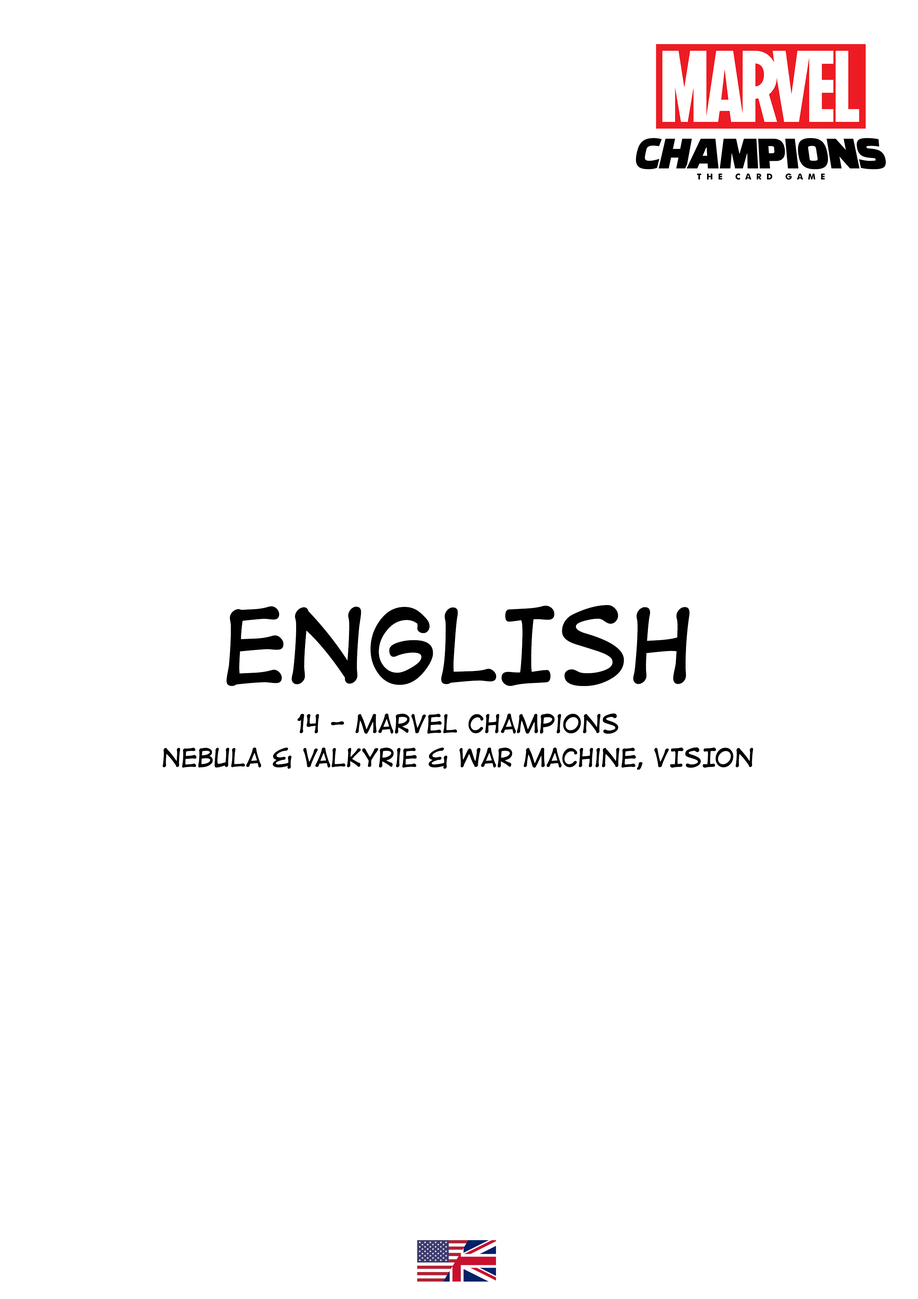
<style>
.page{position:relative;width:918px;height:1299px;background:#ffffff}
.page>*{position:absolute;margin:0}
.t1{font:123.4px "DigitalStripBB";color:#000000}
.t2{font:30.9px/33.9px "DigitalStripBB";color:#000000}
</style>
<div class="page">
<p class="t1" style="left:227px;top:605px;width:463px;height:81px">ENGLISH</p>
<p class="t2" style="left:163px;top:713px;width:590px;height:57px;text-align:center">14 - Marvel Champions<br>Nebula &amp; Valkyrie &amp; War Machine, VISION</p>
</div>
